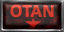
<style>
.page{position:relative;width:64px;height:32px}
.page>*{position:absolute;margin:0}
.t1{font:18.7px "Calibri-Bold";letter-spacing:0.02em;text-transform:uppercase}
</style>
<div class="page">
<p class="t1" style="left:10px;top:4px;width:44px;height:14px">OTAN</p>
</div>
